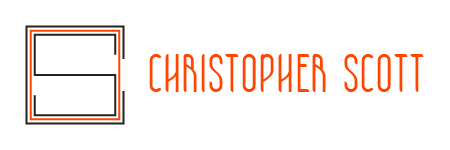
<style>
.page{position:relative;width:450px;height:150px;background:#ffffff}
.page>*{position:absolute;margin:0}
.t1{font:54.2px "PatinioContexto";color:#ff4500}
</style>
<div class="page">
<p class="t1" style="left:149px;top:54px;width:275px;height:38px">CHRISTOPHER SCOTT</p>
</div>
